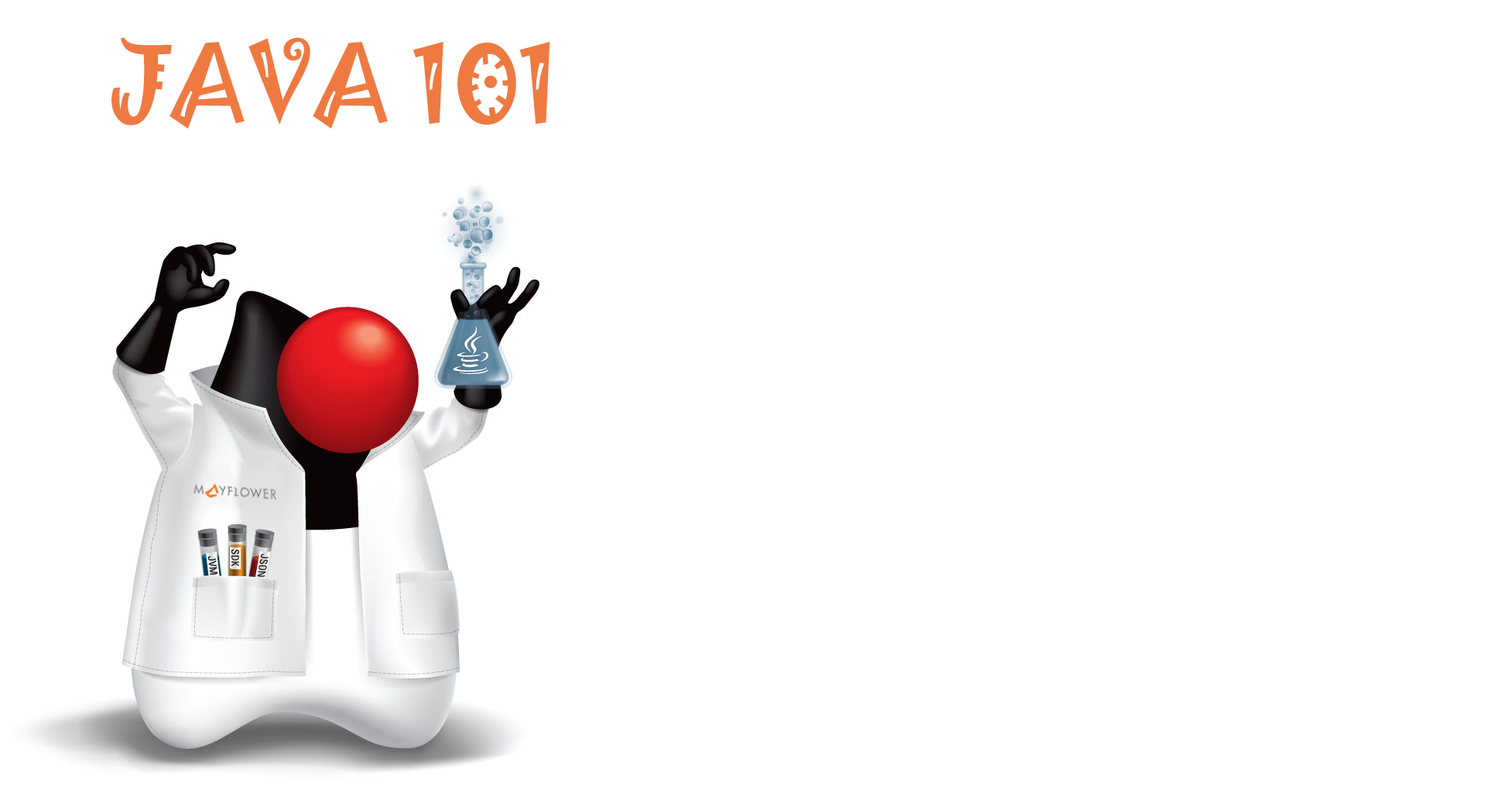
<style>
.page{position:relative;width:1486px;height:803px;background:#ffffff}
.page>*{position:absolute;margin:0}
.t1{font:96.6px "Jokerman-Regular";color:#ee7a41;font-variant:small-caps}
</style>
<div class="page">
<p class="t1" style="left:111px;top:37px;width:439px;height:91px">JAVA 101</p>
</div>
